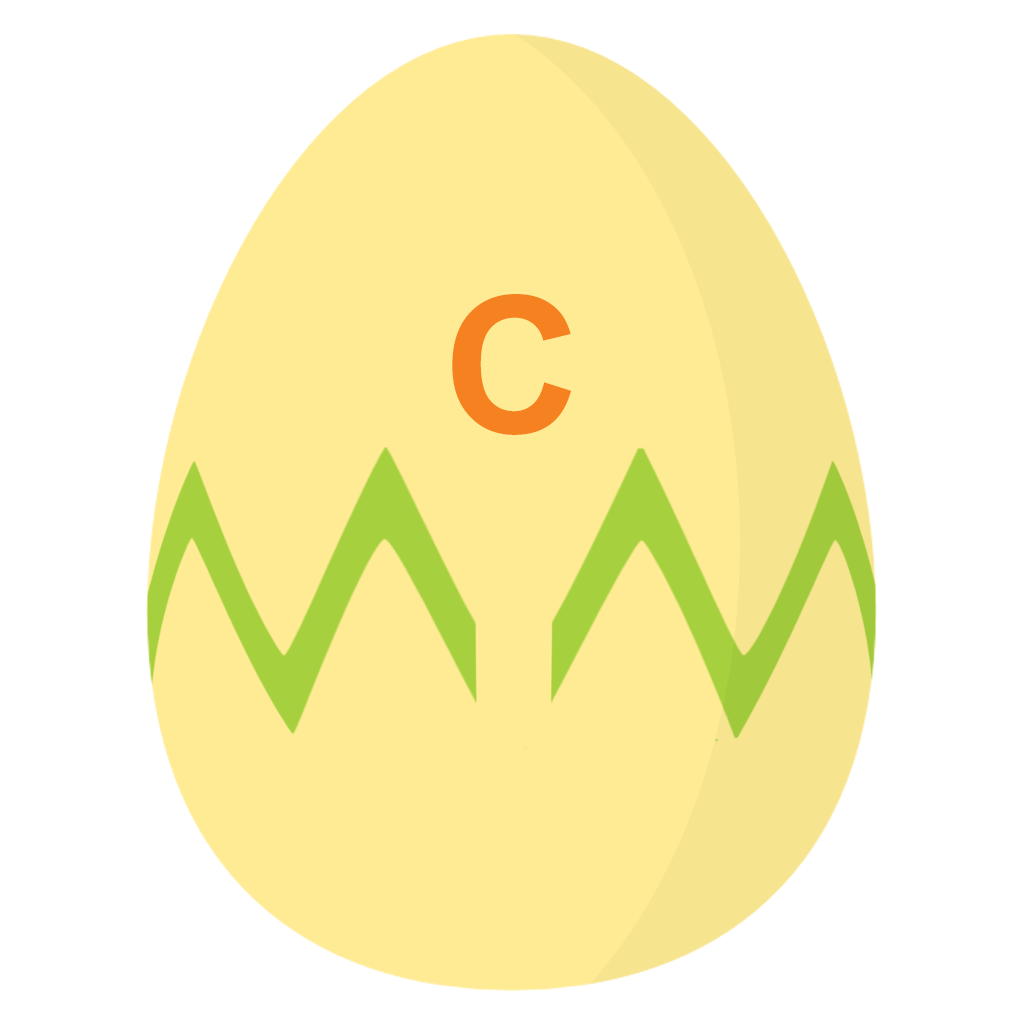
<style>
.page{position:relative;width:1024px;height:1024px;background:#ffffff}
.page>*{position:absolute;margin:0}
.t1{font:190px "Arial-BoldMT";color:#f68121}
</style>
<div class="page">
<p class="t1" style="left:452px;top:294px;width:119px;height:141px">C</p>
</div>
